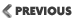
<style>
.page{position:relative;width:75px;height:22px;background:#ffffff}
.page>*{position:absolute;margin:0}
.t1{font:13px "Agenda-Black";letter-spacing:-0.025em;color:#3c3c3c;text-transform:uppercase}
</style>
<div class="page">
<p class="t1" style="left:15px;top:6px;width:57px;height:10px">previous</p>
</div>
